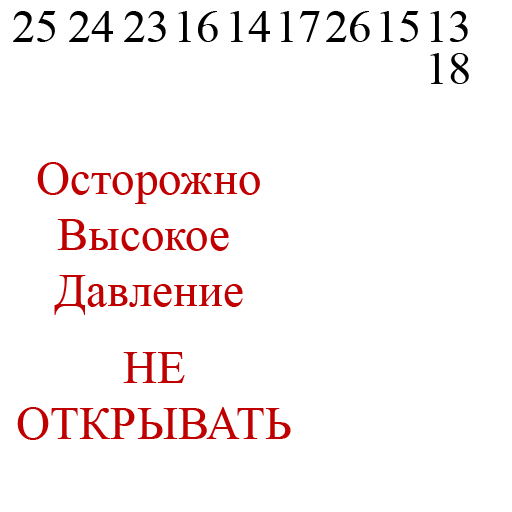
<style>
.page{position:relative;width:512px;height:512px;background:#ffffff}
.page>*{position:absolute;margin:0}
.t1{font:47px "TimesNewRomanPSMT";color:#000000}
.t2{font:47px "TimesNewRomanPSMT";color:#c00000}
</style>
<div class="page">
<p class="t1" style="left:13px;top:11px;width:43px;height:31px">25</p>
<p class="t1" style="left:69px;top:11px;width:44px;height:31px">24</p>
<p class="t1" style="left:124px;top:11px;width:42px;height:31px">23</p>
<p class="t1" style="left:178px;top:11px;width:40px;height:31px">16</p>
<p class="t1" style="left:230px;top:11px;width:40px;height:31px">14</p>
<p class="t1" style="left:280px;top:11px;width:40px;height:31px">17</p>
<p class="t1" style="left:326px;top:11px;width:44px;height:31px">26</p>
<p class="t1" style="left:380px;top:11px;width:39px;height:31px">15</p>
<p class="t1" style="left:430px;top:11px;width:38px;height:31px">13</p>
<p class="t1" style="left:430px;top:53px;width:39px;height:31px">18</p>
<p class="t2" style="left:37px;top:162px;width:223px;height:153px;text-align:center">Осторожно<br>Высокое <br>Давление</p>
<p class="t2" style="left:17px;top:352px;width:274px;height:88px;text-align:center">НЕ<br>ОТКРЫВАТЬ</p>
</div>
